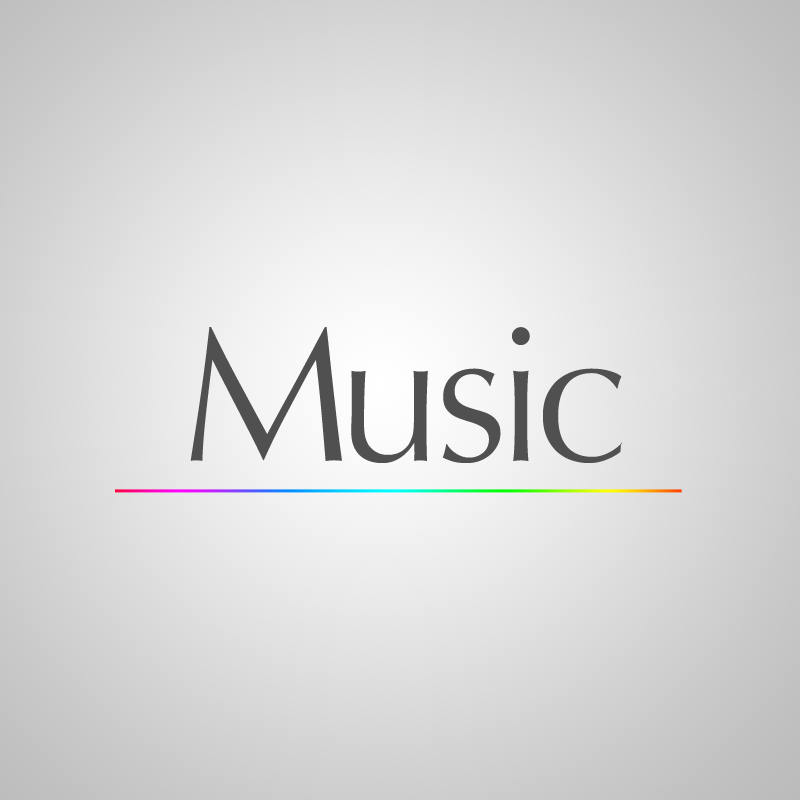
<style>
.page{position:relative;width:800px;height:800px}
.page>*{position:absolute;margin:0}
.t1{font:190.5px "OregonLDOBook";color:#505050}
</style>
<div class="page">
<p class="t1" style="left:190px;top:327px;width:432px;height:136px">Music</p>
</div>
